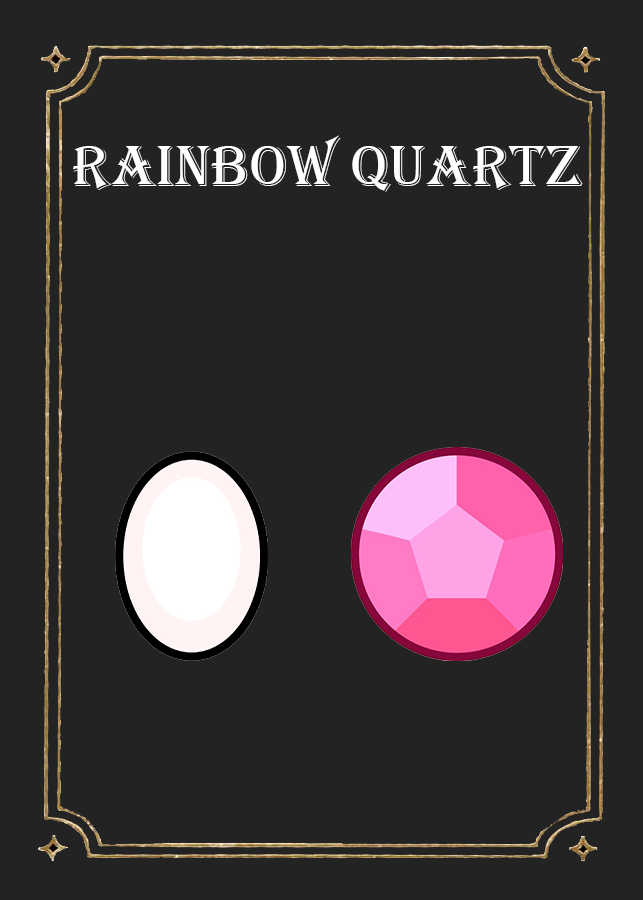
<style>
.page{position:relative;width:643px;height:900px;background:#232323}
.page>*{position:absolute;margin:0}
.t1{font:60.4px "Algerian";color:#ffffff}
</style>
<div class="page">
<p class="t1" style="left:73px;top:135px;width:510px;height:57px">Rainbow Quartz</p>
</div>
